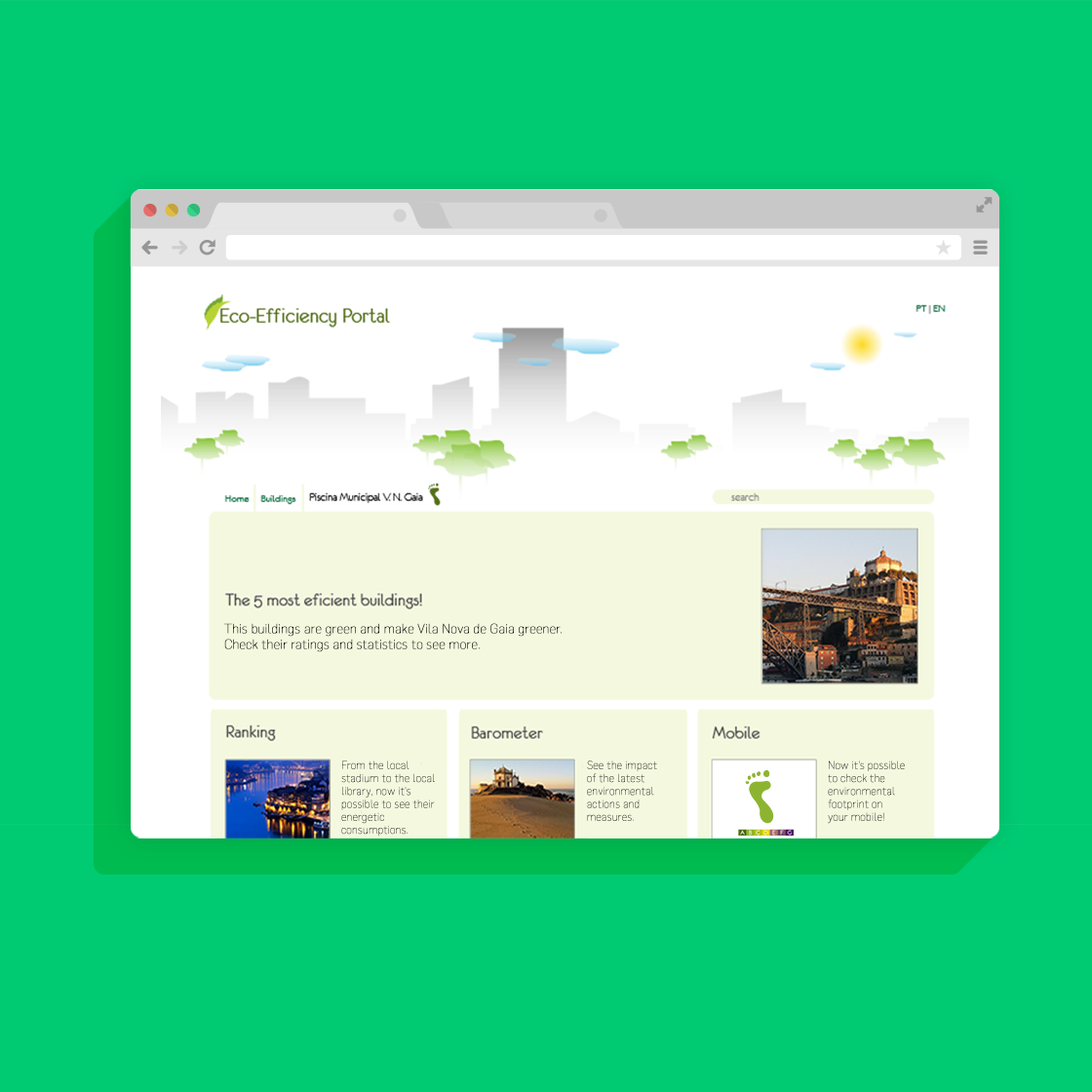
<style>
.page{position:relative;width:1092px;height:1092px;background:#00cb73}
.page>*{position:absolute;margin:0}
.t1{font:13px "Flama-Thin";color:#000000;font-weight:bold}
.t2{font:10.8px "Flama-Thin";font-weight:bold}
</style>
<div class="page">
<p class="t1" style="left:224px;top:623px;width:338px;height:29px">This buildings are green and make Vila Nova de Gaia greener.<br>Check their ratings and statistics to see more.</p>
<p class="t2" style="left:341px;top:760px;width:94px;height:77px">From the local<br>stadium to the local<br>library, now it’s<br>possible to see their<br>energetic<br>consumptions.</p>
<p class="t2" style="left:587px;top:760px;width:70px;height:61px">See the impact<br>of the latest<br>environmental<br>actions and<br>measures.</p>
<p class="t2" style="left:828px;top:760px;width:77px;height:64px">Now it’s possible<br>to check the<br>environmental<br>footprint on<br>your mobile!</p>
</div>
